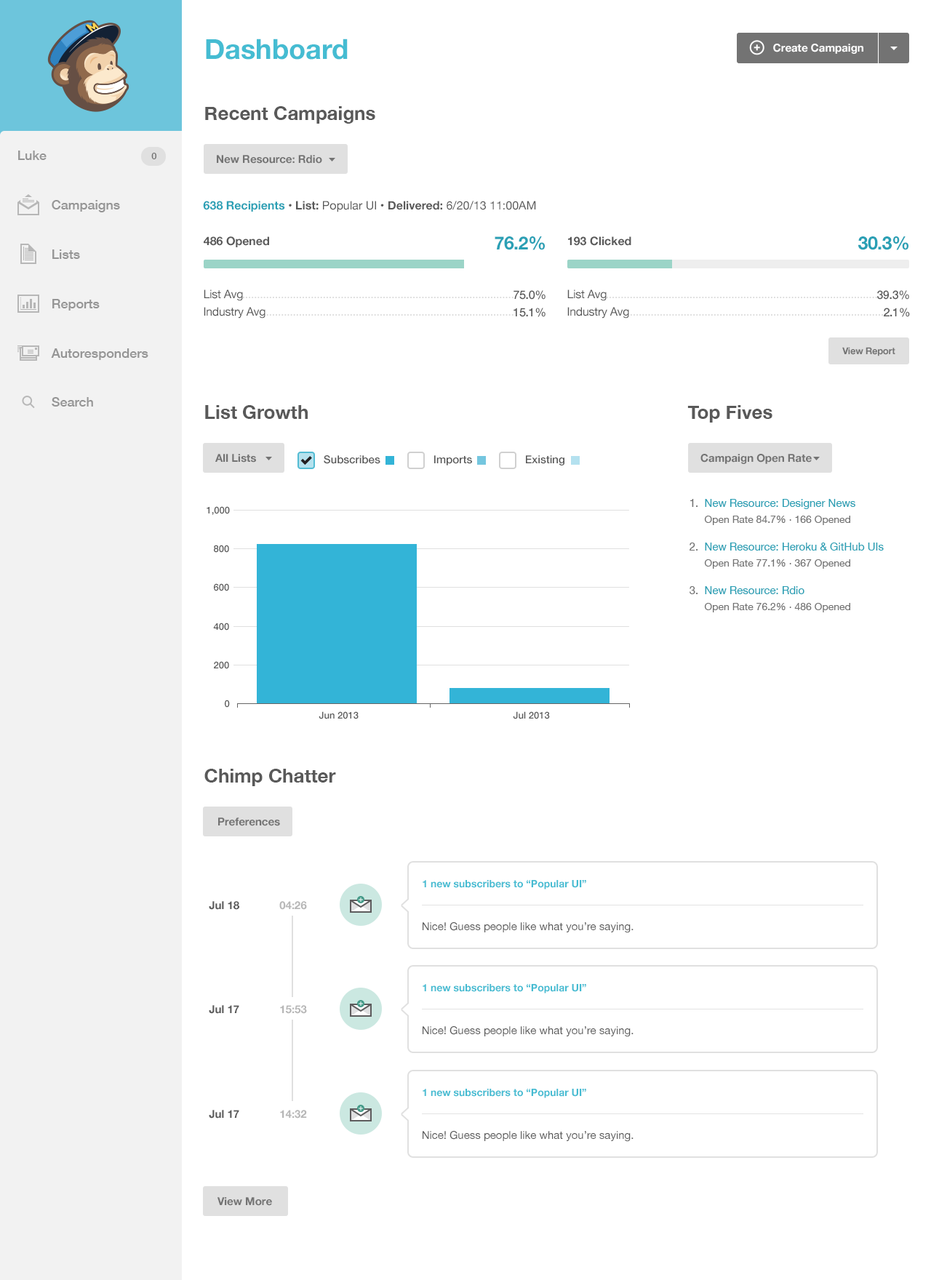
<style>
.page{position:relative;width:931px;height:1280px;background:#ffffff}
.page>*{position:absolute;margin:0}
.t1{font:27.6px "HelveticaNeue-Bold";color:#45bcd2}
.t2{font:10.9px "HelveticaNeue-Bold";color:#ffffff}
.t3{font:18.9px "HelveticaNeue-Bold";color:#595959}
.t4{font:13.1px "HelveticaNeue-Medium";color:#959595}
.t5{font:9.5px "HelveticaNeue-Medium";color:#737373}
.t6{font:10.9px "HelveticaNeue-Bold";color:#737373}
.t7{font:11.6px "HelveticaNeue";color:#595959}
.t8{font:11.6px "HelveticaNeue-Bold";color:#2aa0b5}
.t9{font:11.6px "HelveticaNeue-Bold";color:#595959}
.t10{font:18.2px "HelveticaNeue-Bold";letter-spacing:-0.02em;color:#2aa0b5}
.t11{font:11.6px "HelveticaNeue";letter-spacing:-0.02em;color:#595959}
.t12{font:11.6px "HelveticaNeue-Medium";letter-spacing:-0.02em;color:#595959}
.t13{font:9.5px "HelveticaNeue-Bold";letter-spacing:-0.02em;color:#737373}
.t14{font:10.9px "HelveticaNeue-Medium";color:#595959}
.t15{font:9.5px "HelveticaNeue-Medium";color:#595959}
.t16{font:10.2px/16px "HelveticaNeue";color:#737373}
.t17{font:10.9px "HelveticaNeue";color:#737373}
.t18{font:10.9px "HelveticaNeue";color:#2aa0b5}
.t19{font:10.2px "HelveticaNeue-Bold";color:#45bcd2}
.t20{font:10.9px "HelveticaNeue-Bold";color:#595959}
.t21{font:10.9px "HelveticaNeue-Bold";color:#b7b7b7}
.t22{font:10.9px "HelveticaNeue";color:#595959}
</style>
<div class="page">
<p class="t1" style="left:206px;top:39px;width:142px;height:21px">Dashboard</p>
<p class="t2" style="left:773px;top:44px;width:91px;height:10px">Create Campaign</p>
<p class="t3" style="left:205px;top:106px;width:170px;height:18px">Recent Campaigns</p>
<p class="t4" style="left:18px;top:151px;width:29px;height:9px">Luke</p>
<p class="t5" style="left:151px;top:153px;width:6px;height:6px">0</p>
<p class="t6" style="left:217px;top:155px;width:105px;height:9px">New Resource: Rdio</p>
<p class="t4" style="left:52px;top:200px;width:68px;height:12px">Campaigns</p>
<p class="t7" style="left:203px;top:201px;width:333px;height:11px"><span class="t8">638 Recipients </span>•<span class="t9"> List: </span>Popular UI <span class="t9">• Delivered: </span>6/20/13 11:00AM</p>
<p class="t9" style="left:204px;top:236px;width:65px;height:11px">486 Opened</p>
<p class="t10" style="left:495px;top:236px;width:50px;height:14px">76.2%</p>
<p class="t9" style="left:568px;top:236px;width:64px;height:10px">193 Clicked</p>
<p class="t10" style="left:858px;top:236px;width:51px;height:14px">30.3%</p>
<p class="t4" style="left:52px;top:250px;width:28px;height:9px">Lists</p>
<p class="t11" style="left:204px;top:290px;width:39px;height:11px">List Avg</p>
<p class="t12" style="left:514px;top:290px;width:32px;height:10px">75.0%</p>
<p class="t11" style="left:567px;top:290px;width:40px;height:11px">List Avg</p>
<p class="t12" style="left:877px;top:290px;width:32px;height:10px">39.3%</p>
<p class="t4" style="left:52px;top:299px;width:48px;height:12px">Reports</p>
<p class="t11" style="left:204px;top:307px;width:62px;height:12px">Industry Avg</p>
<p class="t12" style="left:514px;top:308px;width:32px;height:9px">15.1%</p>
<p class="t11" style="left:567px;top:307px;width:62px;height:12px">Industry Avg</p>
<p class="t12" style="left:884px;top:308px;width:26px;height:9px">2.1%</p>
<p class="t4" style="left:51px;top:348px;width:97px;height:12px">Autoresponders</p>
<p class="t13" style="left:842px;top:347px;width:54px;height:9px">View Report</p>
<p class="t4" style="left:52px;top:397px;width:41px;height:10px">Search</p>
<p class="t3" style="left:205px;top:405px;width:103px;height:14px">List Growth</p>
<p class="t3" style="left:688px;top:405px;width:85px;height:18px">Top Fives</p>
<p class="t6" style="left:215px;top:454px;width:41px;height:9px">All Lists</p>
<p class="t14" style="left:324px;top:455px;width:57px;height:9px">Subscribes</p>
<p class="t14" style="left:434px;top:455px;width:38px;height:11px">Imports</p>
<p class="t14" style="left:526px;top:455px;width:39px;height:11px">Existing</p>
<p class="t6" style="left:701px;top:454px;width:111px;height:10px">Campaign Open Rate</p>
<p class="t15" style="left:207px;top:506px;width:23px;height:9px">1,000</p>
<p class="t16" style="left:690px;top:499px;width:166px;height:26px"><span class="t17">1.</span><span class="t18">  New Resource: Designer News<br>     </span>Open Rate 84.7% · 166 Opened</p>
<p class="t15" style="left:214px;top:545px;width:15px;height:8px">800</p>
<p class="t18" style="left:690px;top:543px;width:194px;height:26px"><span class="t17">2.</span>  New Resource: Heroku &amp; GitHub UIs<br>     <span class="t16">Open Rate 77.1% · 367 Opened</span></p>
<p class="t15" style="left:214px;top:583px;width:15px;height:8px">600</p>
<p class="t16" style="left:690px;top:586px;width:160px;height:27px"><span class="t17">3.</span><span class="t18">  New Resource: Rdio<br>     </span>Open Rate 76.2% · 486 Opened</p>
<p class="t15" style="left:213px;top:623px;width:16px;height:8px">400</p>
<p class="t15" style="left:214px;top:661px;width:15px;height:8px">200</p>
<p class="t15" style="left:225px;top:700px;width:5px;height:8px">0</p>
<p class="t15" style="left:319px;top:712px;width:40px;height:8px">Jun 2013</p>
<p class="t15" style="left:513px;top:712px;width:37px;height:8px">Jul 2013</p>
<p class="t3" style="left:204px;top:769px;width:132px;height:17px">Chimp Chatter</p>
<p class="t6" style="left:218px;top:818px;width:62px;height:8px">Preferences</p>
<p class="t19" style="left:423px;top:880px;width:163px;height:10px">1 new subscribers to “Popular UI”</p>
<p class="t20" style="left:209px;top:901px;width:30px;height:9px">Jul 18</p>
<p class="t21" style="left:279px;top:901px;width:28px;height:9px">04:26</p>
<p class="t22" style="left:423px;top:923px;width:211px;height:10px">Nice! Guess people like what you’re saying.</p>
<p class="t19" style="left:423px;top:984px;width:163px;height:10px">1 new subscribers to “Popular UI”</p>
<p class="t20" style="left:209px;top:1005px;width:30px;height:9px">Jul 17</p>
<p class="t21" style="left:280px;top:1005px;width:27px;height:9px">15:53</p>
<p class="t22" style="left:423px;top:1027px;width:211px;height:10px">Nice! Guess people like what you’re saying.</p>
<p class="t19" style="left:423px;top:1089px;width:163px;height:10px">1 new subscribers to “Popular UI”</p>
<p class="t20" style="left:209px;top:1110px;width:30px;height:9px">Jul 17</p>
<p class="t21" style="left:280px;top:1110px;width:27px;height:9px">14:32</p>
<p class="t22" style="left:423px;top:1131px;width:211px;height:11px">Nice! Guess people like what you’re saying.</p>
<p class="t6" style="left:218px;top:1198px;width:54px;height:8px">View More</p>
</div>
